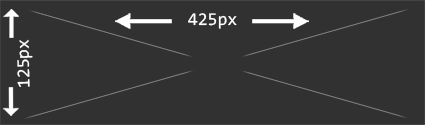
<style>
.page{position:relative;width:425px;height:125px;background:#313131}
.page>*{position:absolute;margin:0}
.t1{font:17.9px "Consolas";color:#fffefe}
</style>
<div class="page">
<p class="t1" style="left:188px;top:13px;width:49px;height:16px">425px</p>
<p class="t1" style="left:17px;top:39px;width:16px;height:48px;rotate:179deg">125px</p>
</div>
